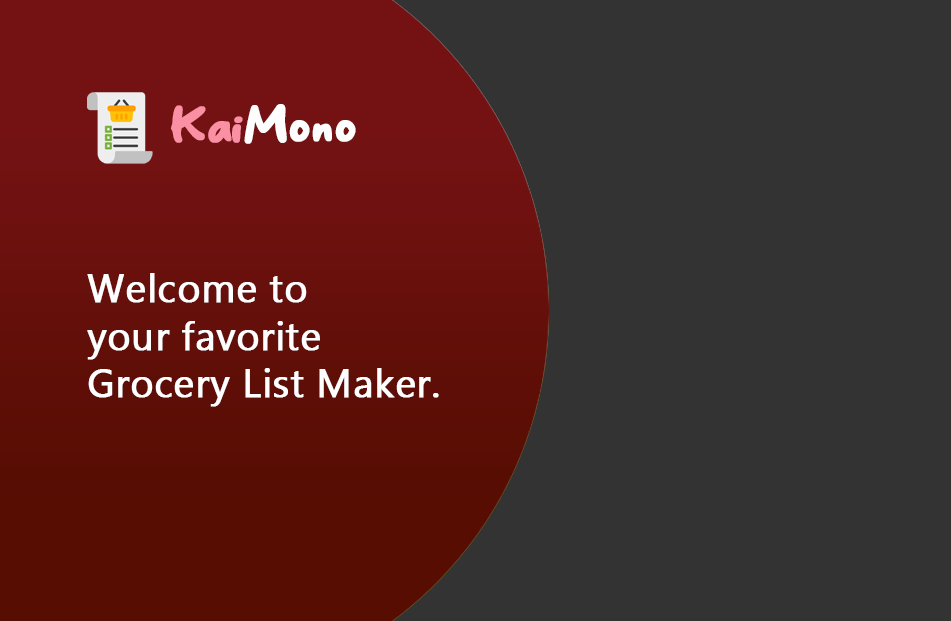
<style>
.page{position:relative;width:951px;height:621px;background:#333333}
.page>*{position:absolute;margin:0}
.t1{font:48.6px "Singkong";color:#fffefe;font-weight:bold}
.t2{font:48.6px "Singkong";color:#fb90a4;font-weight:bold}
.t3{font:39.4px "Gadugi";color:#ffffff;font-weight:bold}
</style>
<div class="page">
<p class="t1" style="left:171px;top:104px;width:185px;height:40px"><span class="t2">Kai</span>Mono</p>
<p class="t3" style="left:87px;top:273px;width:352px;height:134px">Welcome to<br>your favorite<br>Grocery List Maker.</p>
</div>
